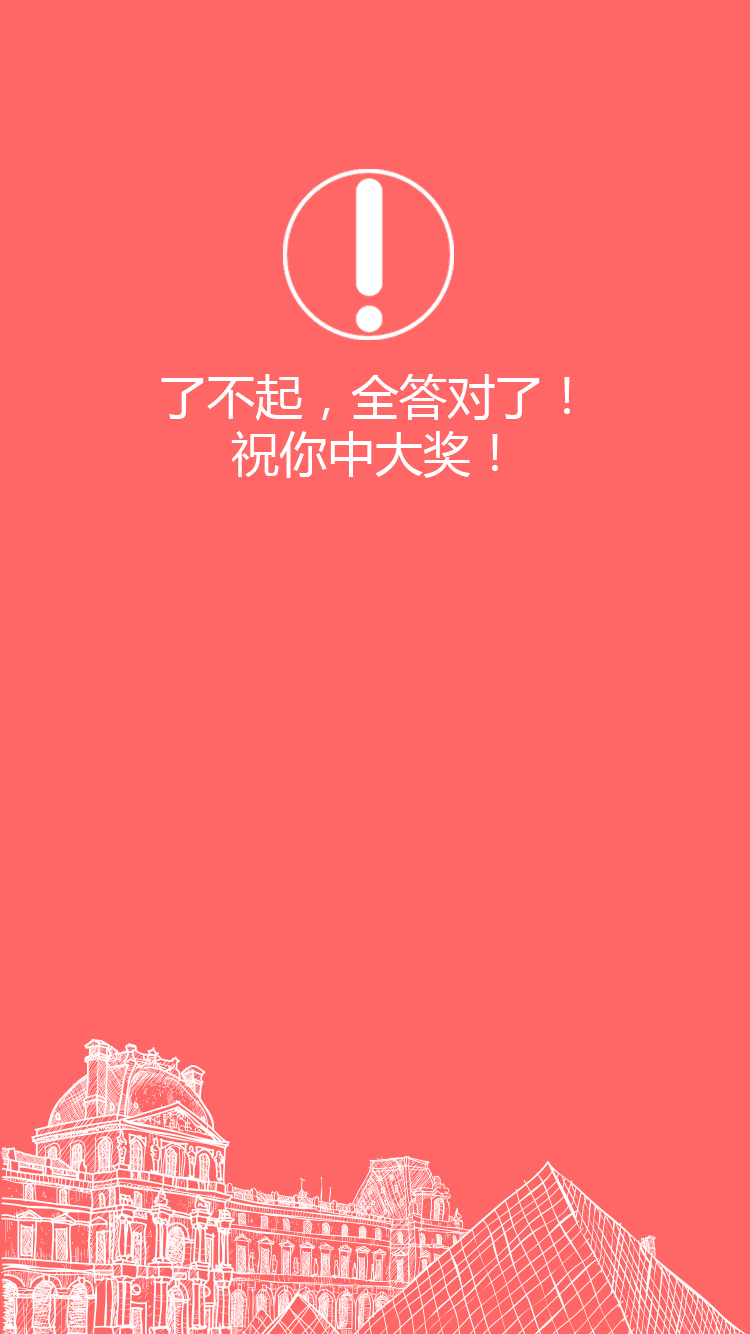
<style>
.page{position:relative;width:750px;height:1334px;background:#ff6666}
.page>*{position:absolute;margin:0}
.t1{font:48px "MicrosoftYaHei";color:#ffffff}
</style>
<div class="page">
<p class="t1" style="left:161px;top:374px;width:409px;height:104px;text-align:center">了不起，全答对了！<br>祝你中大奖！</p>
</div>
